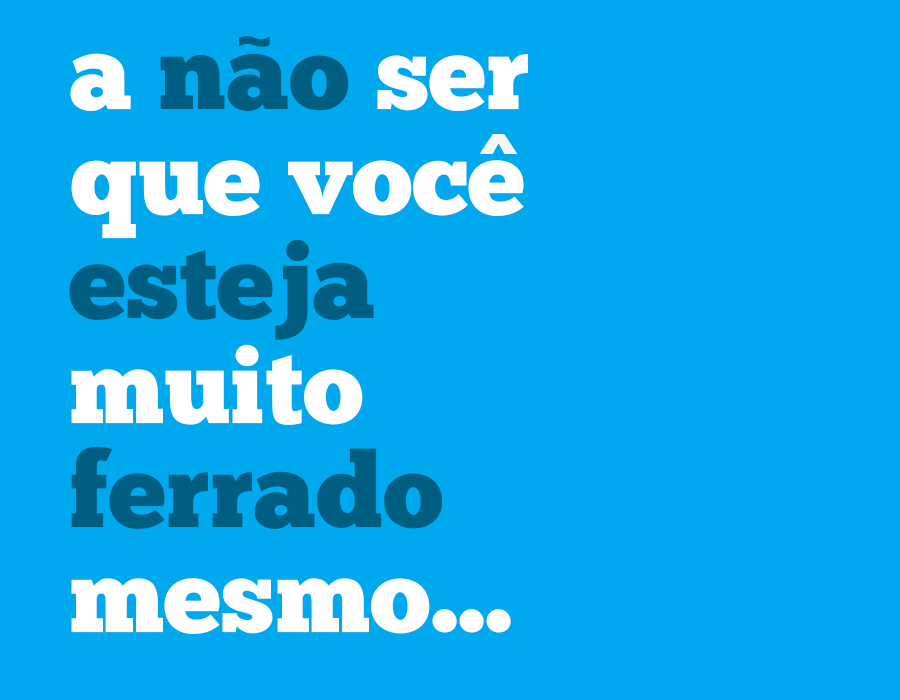
<style>
.page{position:relative;width:900px;height:700px;background:#00a9ee}
.page>*{position:absolute;margin:0}
.t1{font:77.1px "ChunkFive-Roman";color:#005e83}
.t2{font:104.5px/104.5px "ChunkFive-Roman";color:#ffffff}
.t3{font:104.5px/104.5px "ChunkFive-Roman";color:#005e83}
.t4{font:66.2px "MEgalopolisExtra";color:#f7f7f7}
</style>
<div class="page">
<p class="t1" style="left:239px;top:36px;width:31px;height:11px">~</p>
<p class="t2" style="left:69px;top:53px;width:459px;height:581px">a <span class="t3">nao</span> ser<br>que voce<br><span class="t3">esteja<br></span>muito<br><span class="t3">ferrado<br></span>mesmo...</p>
<p class="t4" style="left:479px;top:134px;width:39px;height:20px">^</p>
</div>
